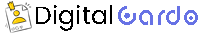
<style>
.page{position:relative;width:200px;height:35px;background:#ffffff}
.page>*{position:absolute;margin:0}
.t1{font:24.9px "Poppins-Regular";color:#000000}
.t2{font:20.4px "digitalgeometric-Bold";color:#6772e5}
</style>
<div class="page">
<p class="t1" style="left:36px;top:5px;width:76px;height:26px">Digital</p>
<p class="t2" style="left:118px;top:6px;width:80px;height:19px">Cardo</p>
</div>
